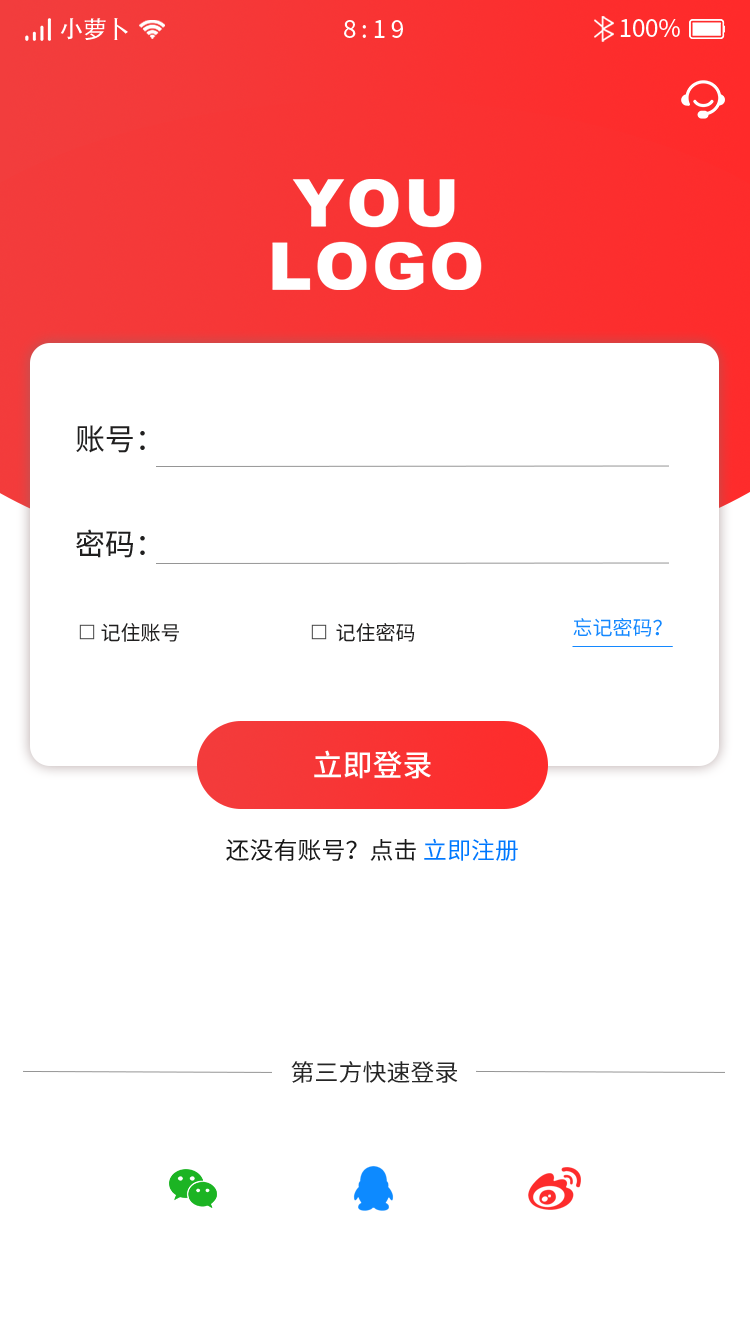
<style>
.page{position:relative;width:750px;height:1334px;background:#ffffff}
.page>*{position:absolute;margin:0}
.t1{font:24px "AdobeHeitiStd-Regular";color:#ffffff}
.t2{font:24px "SourceHanSansCN-Regular";letter-spacing:0.2em;color:#ffffff}
.t3{font:24px "SourceHanSansCN-Regular";color:#ffffff}
.t4{font:30px "SourceHanSansCN-Regular";color:#201f1f}
.t5{font:20px "SourceHanSansCN-Regular";color:#201f1f}
.t6{font:20px "SourceHanSansCN-Regular";color:#1488ff;text-decoration:underline}
.t7{font:30px "SourceHanSansCN-Medium";color:#ffffff}
.t8{font:24px "SourceHanSansCN-Regular";color:#191919}
.t9{font:24px "SourceHanSansCN-Regular";color:#0078ff}
.t10{font:23.6px "SourceHanSansCN-Regular";color:#252525}
</style>
<div class="page">
<p class="t1" style="left:60px;top:18px;width:68px;height:22px">小萝卜</p>
<p class="t2" style="left:344px;top:20px;width:59px;height:18px">8:19</p>
<p class="t3" style="left:620px;top:19px;width:60px;height:18px">100%</p>
<p class="t4" style="left:76px;top:425px;width:69px;height:28px">账号：</p>
<p class="t4" style="left:76px;top:529px;width:69px;height:29px">密码：</p>
<p class="t5" style="left:101px;top:623px;width:78px;height:19px">记住账号</p>
<p class="t5" style="left:336px;top:623px;width:79px;height:19px">记住密码</p>
<p class="t6" style="left:572px;top:618px;width:101px;height:29px">忘记密码？</p>
<p class="t7" style="left:314px;top:750px;width:117px;height:29px">立即登录</p>
<p class="t8" style="left:226px;top:838px;width:292px;height:23px">还没有账号？点击 <span class="t9">立即注册</span></p>
<p class="t10" style="left:291px;top:1061px;width:167px;height:22px">第三方快速登录</p>
</div>
